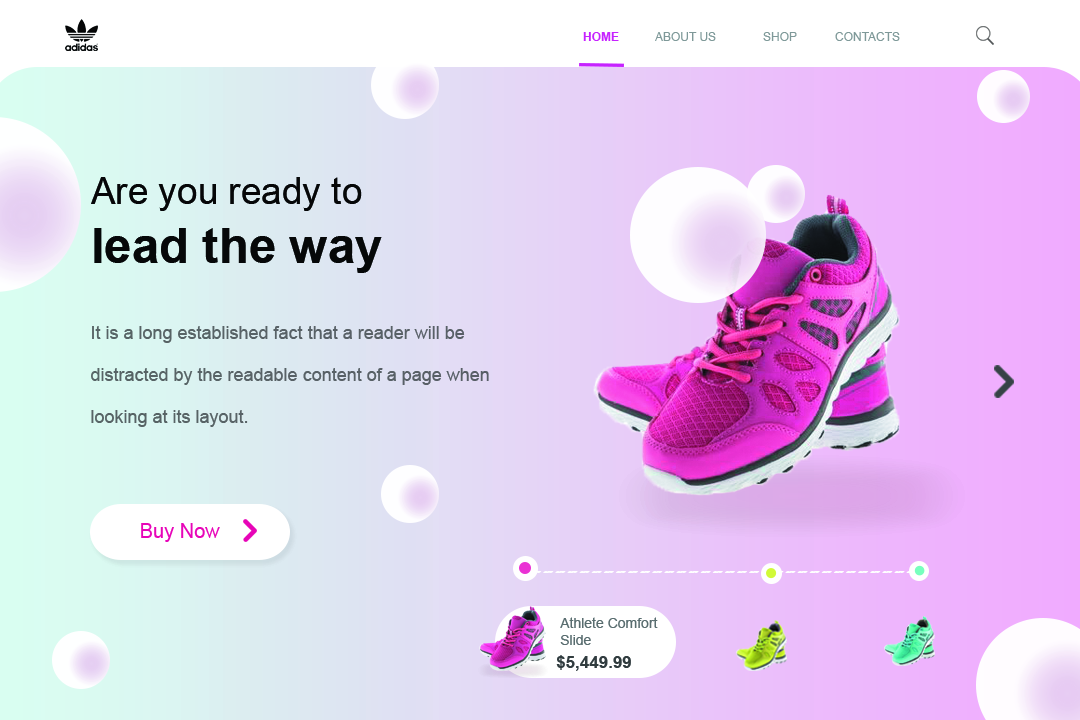
<style>
.page{position:relative;width:1080px;height:720px}
.page>*{position:absolute;margin:0}
.t1{font:12px "ArialMT";color:#839d9a}
.t2{font:12px "Arial-BoldMT";color:#b325ff}
.t3{font:37px "ArialMT";color:#060808}
.t4{font:49px "Arial-BoldMT";color:#070909}
.t5{font:18px/42px "ArialMT";color:#586266}
.t6{font:20px "ArialMT";color:#e705b8}
.t7{font:14px "ArialMT";color:#5a6d70}
.t8{font:17px "Arial-BoldMT";color:#313c3e}
</style>
<div class="page">
<p class="t1" style="left:583px;top:32px;width:317px;height:9px"><span class="t2">HOME</span>   ABOUT US    SHOP   CONTACTS</p>
<p class="t3" style="left:91px;top:177px;width:291px;height:96px">Are you ready to <br><span class="t4">lead the way</span></p>
<p class="t5" style="left:91px;top:326px;width:398px;height:101px">It is a long established fact that a reader will be distracted by the readable content of a page when looking at its layout.</p>
<p class="t6" style="left:141px;top:523px;width:79px;height:19px">Buy Now</p>
<p class="t7" style="left:560px;top:617px;width:98px;height:28px">Athlete Comfort <br>Slide</p>
<p class="t8" style="left:556px;top:655px;width:75px;height:16px">$5,449.99</p>
</div>
